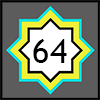
<style>
.page{position:relative;width:100px;height:100px;background:#5c5c5c}
.page>*{position:absolute;margin:0}
.t1{font:33.3px "TrebuchetMS";color:#000000}
</style>
<div class="page">
<p class="t1" style="left:33px;top:39px;width:34px;height:24px">64</p>
</div>
